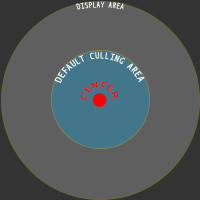
<style>
.page{position:relative;width:200px;height:200px;background:#5f5f5f}
.page>*{position:absolute;margin:0}
.t1{font:7.6px "LucidaSans-Typewriter";letter-spacing:0.1em;color:#ffffff;scale:0.72 1}
.t2{font:7.6px "LucidaSans-Typewriter";letter-spacing:0.1em;color:#ff0000;scale:0.72 1}
</style>
<div class="page">
<p class="t1" style="left:76px;top:1px;width:48px;height:9px">DISPLAY AREA</p>
<p class="t1" style="left:54px;top:52px;width:91px;height:31px;text-align:right">DEFAULT CULLING AREA</p>
<p class="t2" style="left:81px;top:81px;width:37px;height:19px;text-align:right">CENTER</p>
</div>
